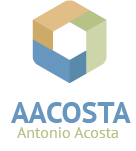
<style>
.page{position:relative;width:136px;height:151px;background:#ffffff}
.page>*{position:absolute;margin:0}
.t1{font:30px "PTSans-Bold";color:#6797be}
.t2{font:16px "PTSans-Regular";color:#b6c387}
</style>
<div class="page">
<p class="t1" style="left:11px;top:102px;width:120px;height:21px">AACOSTA</p>
<p class="t2" style="left:17px;top:127px;width:101px;height:11px">Antonio Acosta</p>
</div>
